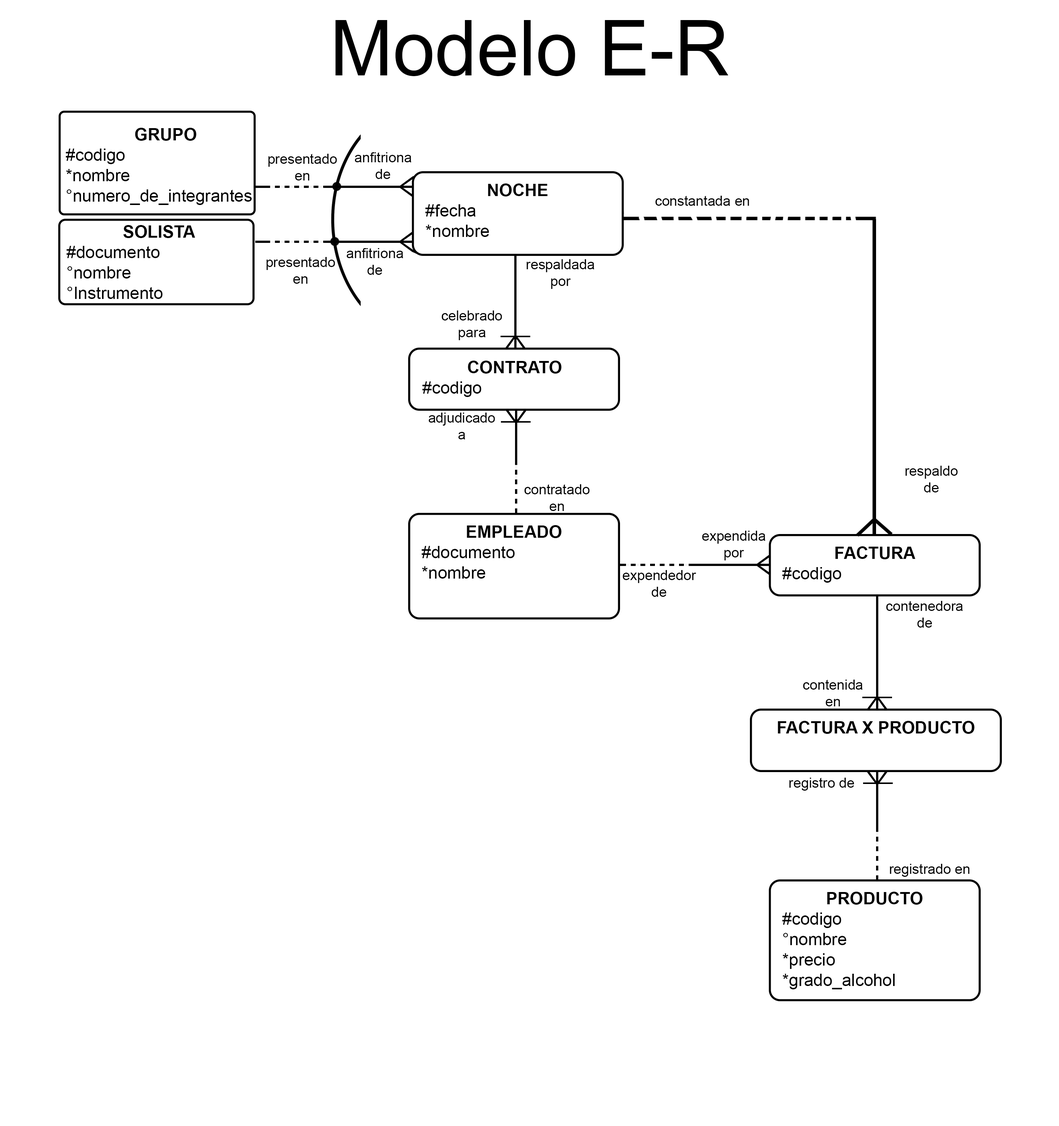
<style>
.page{position:relative;width:1059px;height:1126px;background:#ffffff}
.page>*{position:absolute;margin:0}
.t1{font:77.4px "ArialMT";color:#000000}
.t2{font:17px "ArialMT";color:#000000}
.t3{font:17px "Arial-BoldMT";color:#000000}
.t4{font:13.9px "ArialMT";color:#000000}
</style>
<div class="page">
<p class="t1" style="left:336px;top:20px;width:393px;height:56px">Modelo E-R</p>
<p class="t2" style="left:66px;top:128px;width:186px;height:77px;text-align:center"><span class="t3">GRUPO<br></span>#codigo<br>*nombre<br>°numero_de_integrantes</p>
<p class="t4" style="left:268px;top:154px;width:69px;height:26px;text-align:center">presentado en</p>
<p class="t4" style="left:355px;top:152px;width:57px;height:27px;text-align:center">anfitriona de</p>
<p class="t2" style="left:425px;top:183px;width:123px;height:54px;text-align:center"><span class="t3">NOCHE<br></span>#fecha<br>*nombre</p>
<p class="t4" style="left:656px;top:196px;width:93px;height:10px">constantada en</p>
<p class="t2" style="left:66px;top:225px;width:129px;height:74px;text-align:center"><span class="t3">SOLISTA<br></span>#documento<br>°nombre<br>°Instrumento</p>
<p class="t4" style="left:267px;top:257px;width:68px;height:27px;text-align:center">presentado en</p>
<p class="t4" style="left:347px;top:248px;width:57px;height:27px;text-align:center">anfitriona de</p>
<p class="t4" style="left:527px;top:259px;width:68px;height:30px;text-align:center">respaldada por</p>
<p class="t4" style="left:442px;top:310px;width:60px;height:30px;text-align:center">celebrado para</p>
<p class="t3" style="left:422px;top:360px;width:140px;height:37px;text-align:center">CONTRATO<br><span class="t2">#codigo</span></p>
<p class="t4" style="left:429px;top:412px;width:66px;height:27px;text-align:center">adjudicado a</p>
<p class="t4" style="left:906px;top:466px;width:52px;height:26px;text-align:center">respaldo de</p>
<p class="t4" style="left:525px;top:484px;width:65px;height:27px;text-align:center">contratado en</p>
<p class="t2" style="left:422px;top:525px;width:140px;height:53px;text-align:center"><span class="t3">EMPLEADO<br></span>#documento<br>*nombre</p>
<p class="t4" style="left:702px;top:530px;width:64px;height:30px;text-align:center">expendida por</p>
<p class="t3" style="left:783px;top:546px;width:133px;height:36px;text-align:center">FACTURA<br><span class="t2">#codigo</span></p>
<p class="t4" style="left:623px;top:570px;width:74px;height:27px;text-align:center">expendedor de</p>
<p class="t4" style="left:886px;top:601px;width:77px;height:26px;text-align:center">contenedora de</p>
<p class="t4" style="left:803px;top:679px;width:60px;height:27px;text-align:center">contenida en</p>
<p class="t3" style="left:778px;top:721px;width:197px;height:13px">FACTURA X PRODUCTO</p>
<p class="t4" style="left:790px;top:777px;width:65px;height:13px">registro de</p>
<p class="t4" style="left:890px;top:863px;width:80px;height:13px">registrado en</p>
<p class="t2" style="left:783px;top:891px;width:140px;height:98px;text-align:center"><span class="t3">PRODUCTO<br></span>#codigo<br>°nombre<br>*precio<br>*grado_alcohol</p>
</div>
